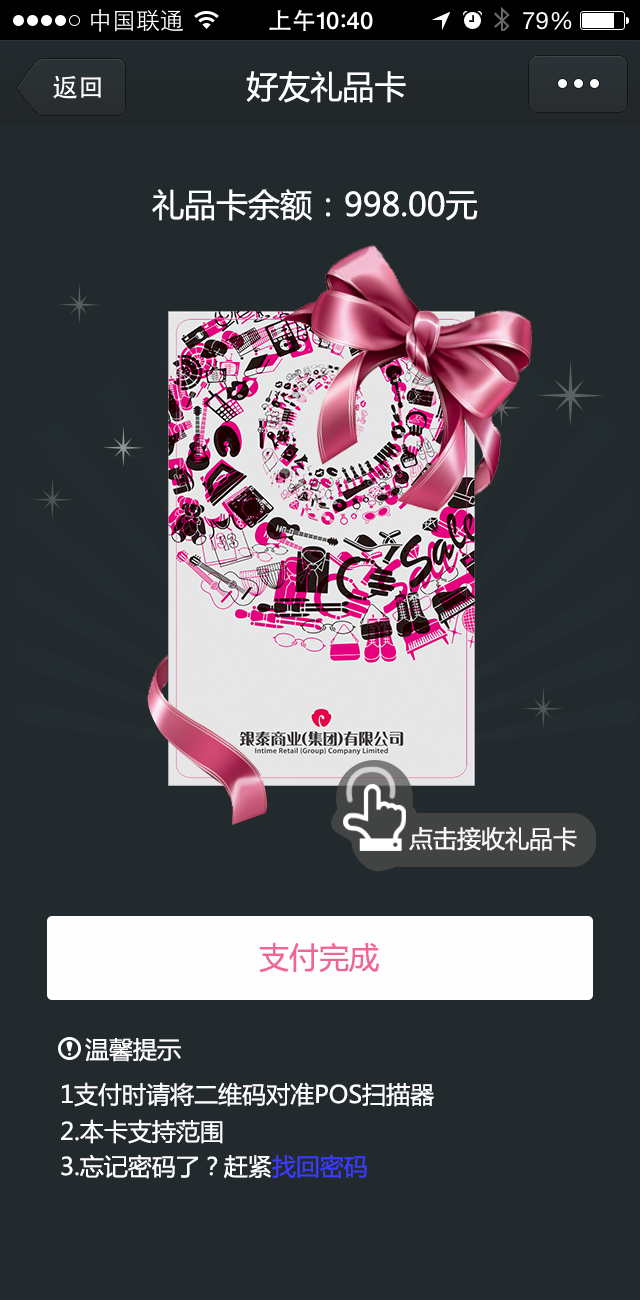
<style>
.page{position:relative;width:640px;height:1300px;background:#222a2d}
.page>*{position:absolute;margin:0}
.t1{font:32px "MicrosoftYaHei";color:#ffffff}
.t2{font:32px "MicrosoftYaHei";color:#fefeff}
.t3{font:24px "MicrosoftYaHei";color:#faf9f9}
.t4{font:30px "MicrosoftYaHei";color:#f16498}
.t5{font:24px "MicrosoftYaHei";color:#fefeff}
.t6{font:24px "MicrosoftYaHei";color:#3b3bfb}
</style>
<div class="page">
<p class="t1" style="left:246px;top:71px;width:160px;height:32px">好友礼品卡</p>
<p class="t2" style="left:152px;top:189px;width:326px;height:32px">礼品卡余额：998.00元</p>
<p class="t3" style="left:409px;top:827px;width:168px;height:24px">点击接收礼品卡</p>
<p class="t4" style="left:259px;top:942px;width:120px;height:31px">支付完成</p>
<p class="t5" style="left:85px;top:1038px;width:96px;height:24px">温馨提示</p>
<p class="t5" style="left:62px;top:1082px;width:372px;height:25px">1支付时请将二维码对准POS扫描器</p>
<p class="t5" style="left:61px;top:1119px;width:162px;height:25px">2.本卡支持范围</p>
<p class="t5" style="left:61px;top:1154px;width:306px;height:25px">3.忘记密码了？赶紧<span class="t6">找回密码</span></p>
</div>
